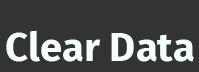
<style>
.page{position:relative;width:199px;height:72px;background:#333333}
.page>*{position:absolute;margin:0}
.t1{font:40px "FiraSans-Bold";color:#f4ffff}
</style>
<div class="page">
<p class="t1" style="left:6px;top:30px;width:188px;height:32px">Clear Data</p>
</div>
